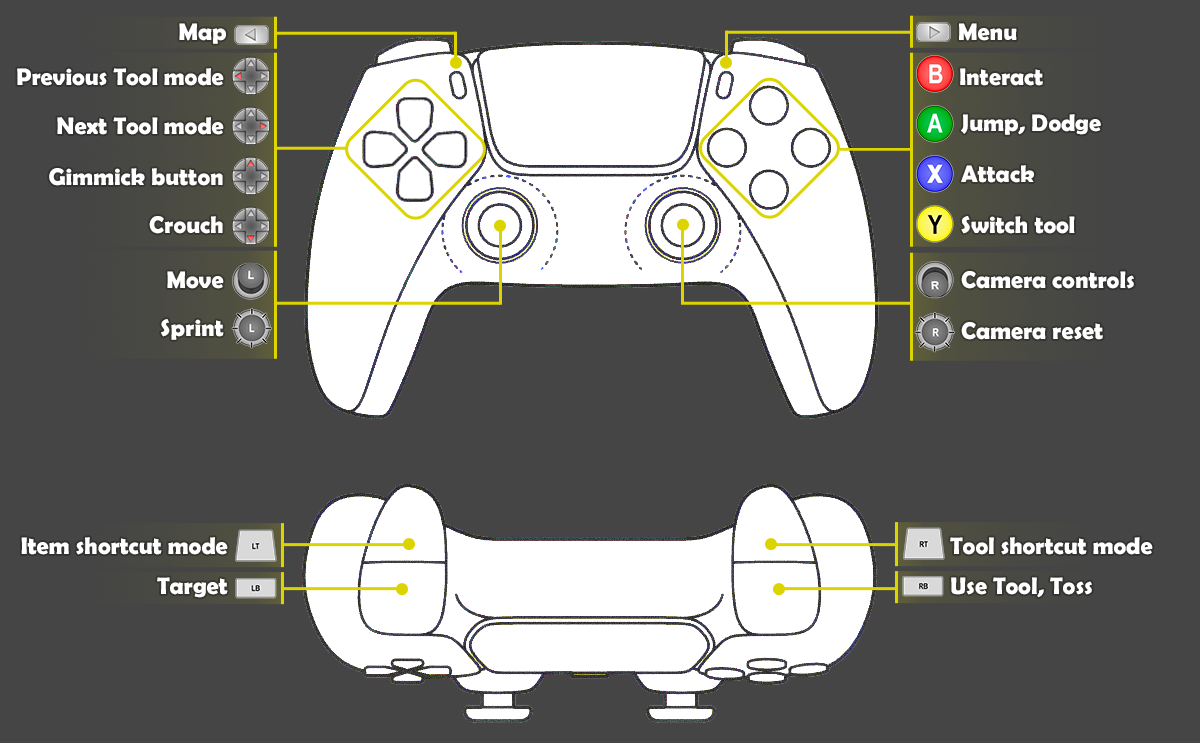
<style>
.page{position:relative;width:1200px;height:743px;background:#454545}
.page>*{position:absolute;margin:0}
.t1{font:24px "BerlinSansFBDemi-Bold";color:#ffffff}
</style>
<div class="page">
<p class="t1" style="left:179px;top:23px;width:47px;height:21px">Map</p>
<p class="t1" style="left:959px;top:23px;width:58px;height:18px">Menu</p>
<p class="t1" style="left:17px;top:68px;width:207px;height:18px">Previous Tool mode</p>
<p class="t1" style="left:960px;top:68px;width:83px;height:18px">Interact</p>
<p class="t1" style="left:57px;top:117px;width:167px;height:18px">Next Tool mode</p>
<p class="t1" style="left:961px;top:114px;width:140px;height:21px">Jump, Dodge</p>
<p class="t1" style="left:49px;top:168px;width:174px;height:18px">Gimmick button</p>
<p class="t1" style="left:961px;top:165px;width:73px;height:18px">Attack</p>
<p class="t1" style="left:149px;top:216px;width:74px;height:18px">Crouch</p>
<p class="t1" style="left:961px;top:216px;width:114px;height:18px">Switch tool</p>
<p class="t1" style="left:167px;top:271px;width:57px;height:18px">Move</p>
<p class="t1" style="left:961px;top:271px;width:173px;height:18px">Camera controls</p>
<p class="t1" style="left:161px;top:319px;width:63px;height:21px">Sprint</p>
<p class="t1" style="left:961px;top:322px;width:142px;height:18px">Camera reset</p>
<p class="t1" style="left:21px;top:537px;width:207px;height:18px">Item shortcut mode</p>
<p class="t1" style="left:950px;top:537px;width:203px;height:18px">Tool shortcut mode</p>
<p class="t1" style="left:157px;top:577px;width:71px;height:21px">Target</p>
<p class="t1" style="left:951px;top:577px;width:141px;height:21px">Use Tool, Toss</p>
</div>
